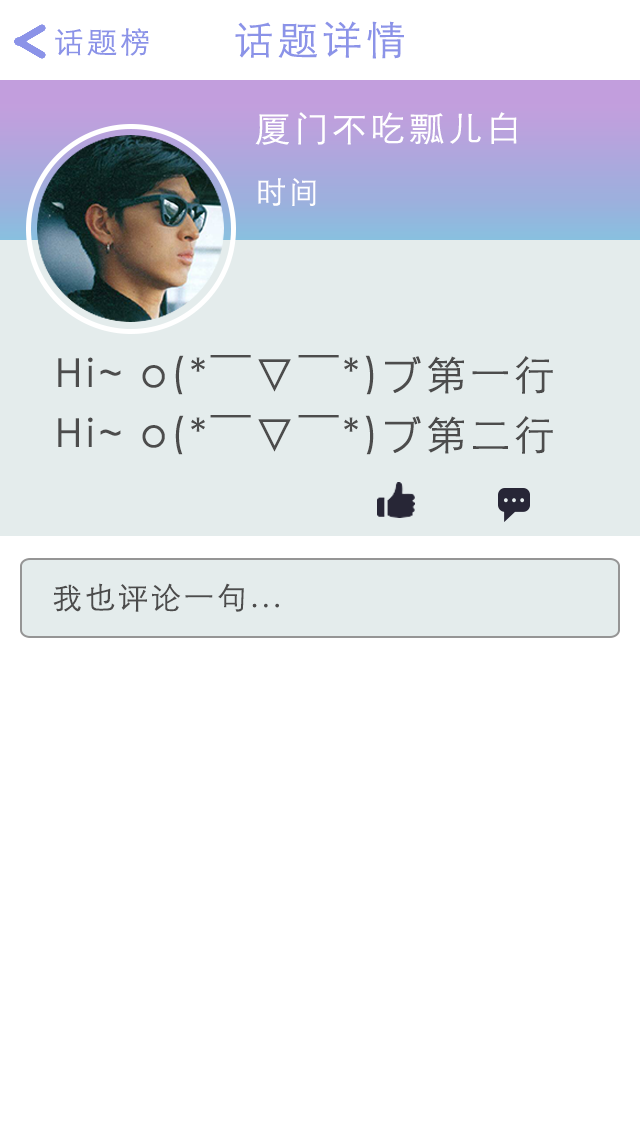
<style>
.page{position:relative;width:640px;height:1136px;background:#ffffff}
.page>*{position:absolute;margin:0}
.t1{font:30px "STXihei";letter-spacing:0.1em;color:#8b93e8}
.t2{font:40px "STXihei";letter-spacing:0.1em;color:#8b93e8}
.t3{font:35px "STXihei";letter-spacing:0.1em;color:#ffffff}
.t4{font:30px "STXihei";letter-spacing:0.1em;color:#ffffff}
.t5{font:40px "STXihei";letter-spacing:0.1em;color:#4c4c4c}
.t6{font:30px "STXihei";letter-spacing:0.1em;color:#4c4c4c}
</style>
<div class="page">
<p class="t1" style="left:55px;top:28px;width:94px;height:28px">话题榜</p>
<p class="t2" style="left:235px;top:21px;width:169px;height:38px">话题详情</p>
<p class="t3" style="left:255px;top:112px;width:262px;height:33px">厦门不吃瓢儿白</p>
<p class="t4" style="left:258px;top:178px;width:58px;height:28px">时间</p>
<p class="t5" style="left:58px;top:355px;width:495px;height:40px">Hi~ o(*￣▽￣*)ブ第一行</p>
<p class="t5" style="left:58px;top:415px;width:495px;height:40px">Hi~ o(*￣▽￣*)ブ第二行</p>
<p class="t6" style="left:53px;top:583px;width:226px;height:29px">我也评论一句...</p>
</div>
